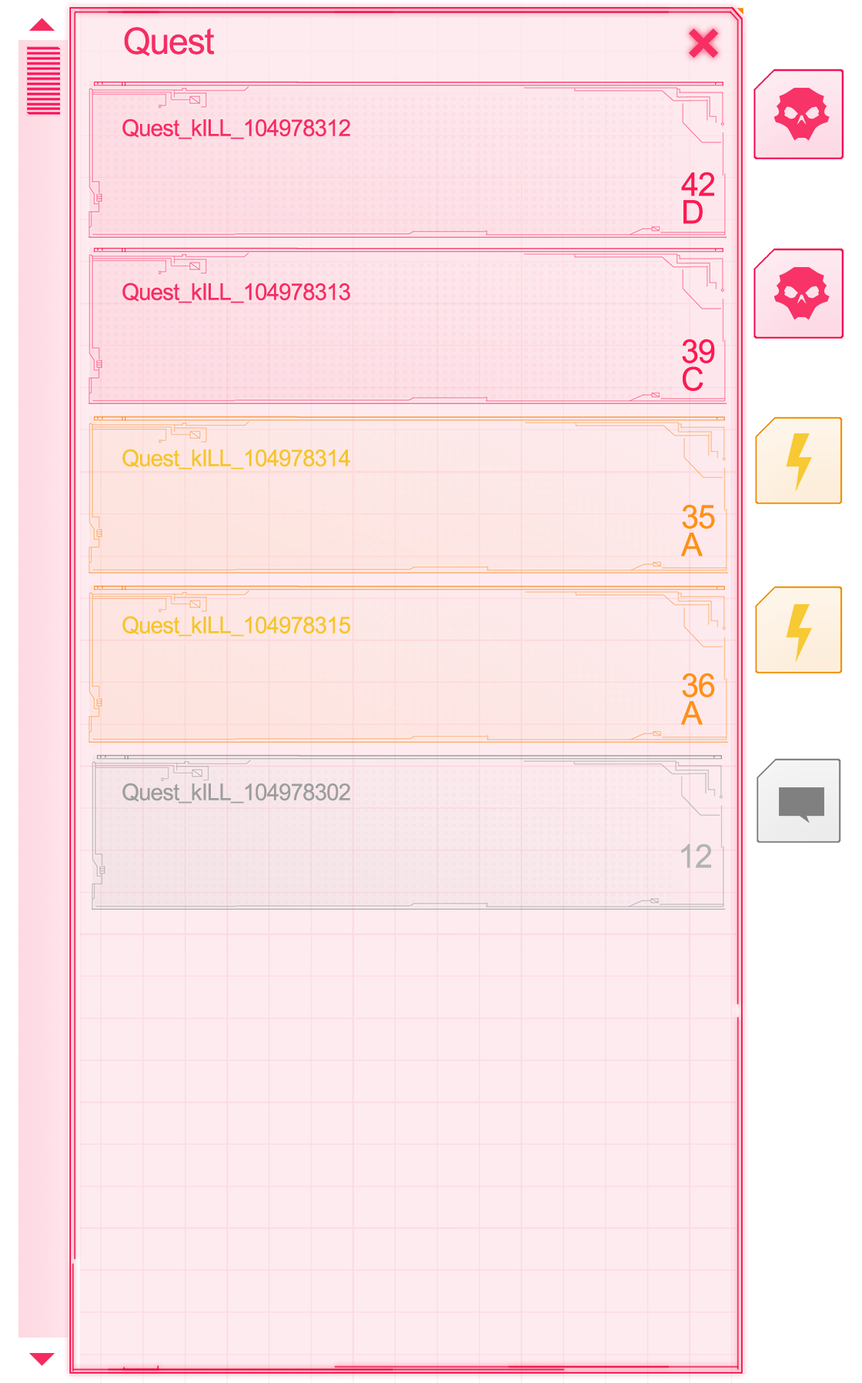
<style>
.page{position:relative;width:862px;height:1383px;background:#fdebf0}
.page>*{position:absolute;margin:0}
.t1{font:36.5px "ArialNarrow";letter-spacing:-0.025em;color:#f62d62;scale:1.2 1}
.t2{font:23.1px "ArialNarrow";letter-spacing:-0.025em;color:#f62d62;scale:1.2 1}
.t3{font:32.5px/27.7px "ArialNarrow";letter-spacing:-0.025em;color:#ff1852;scale:1.2 1}
.t4{font:23.1px "ArialNarrow";letter-spacing:-0.025em;color:#f6c42d;scale:1.2 1}
.t5{font:32.5px/27.7px "ArialNarrow";letter-spacing:-0.025em;color:#ff9018;scale:1.2 1}
.t6{font:23.1px "ArialNarrow";letter-spacing:-0.025em;color:#9d9d9d;scale:1.2 1}
.t7{font:32.5px "ArialNarrow";letter-spacing:-0.025em;color:#b3b3b3;scale:1.2 1}
</style>
<div class="page">
<p class="t1" style="left:124px;top:27px;width:91px;height:29px">Quest</p>
<p class="t2" style="left:122px;top:119px;width:228px;height:20px">Quest_kILL_104978312</p>
<p class="t3" style="left:681px;top:172px;width:33px;height:52px">42<br>D</p>
<p class="t2" style="left:122px;top:282px;width:228px;height:21px">Quest_kILL_104978313</p>
<p class="t3" style="left:682px;top:339px;width:33px;height:52px">39<br>C</p>
<p class="t4" style="left:122px;top:449px;width:228px;height:21px">Quest_kILL_104978314</p>
<p class="t5" style="left:680px;top:504px;width:35px;height:53px">35<br>A</p>
<p class="t4" style="left:122px;top:616px;width:228px;height:21px">Quest_kILL_104978315</p>
<p class="t5" style="left:680px;top:673px;width:35px;height:52px">36<br>A</p>
<p class="t6" style="left:122px;top:783px;width:228px;height:21px">Quest_kILL_104978302</p>
<p class="t7" style="left:681px;top:844px;width:30px;height:24px">12</p>
</div>
